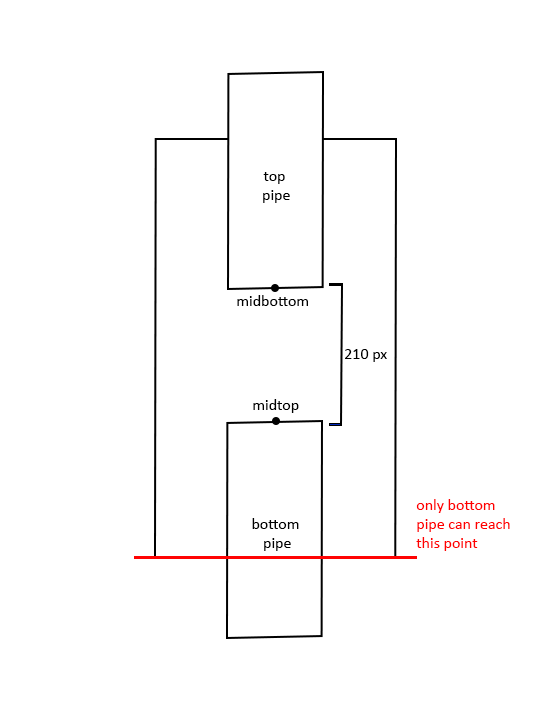
<style>
.page{position:relative;width:550px;height:710px;background:#ffffff}
.page>*{position:absolute;margin:0}
.t1{font:16px "Calibri";color:#000000}
.t2{font:16px "Calibri";color:#ff0000}
</style>
<div class="page">
<p class="t1" style="left:263px;top:172px;width:27px;height:31px;text-align:center">top <br>pipe</p>
<p class="t1" style="left:237px;top:295px;width:71px;height:11px">midbottom</p>
<p class="t1" style="left:345px;top:349px;width:42px;height:13px">210 px</p>
<p class="t1" style="left:253px;top:399px;width:46px;height:14px">midtop</p>
<p class="t2" style="left:416px;top:499px;width:94px;height:52px">only bottom <br>pipe can reach <br>this point</p>
<p class="t1" style="left:252px;top:518px;width:47px;height:33px;text-align:center">bottom <br>pipe</p>
</div>
